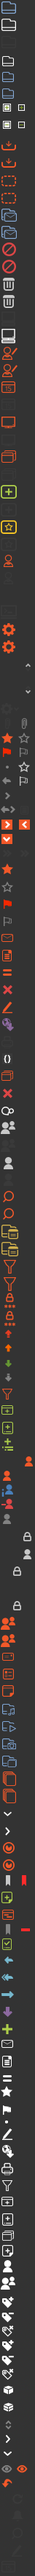
<style>
.page{position:relative;width:35px;height:2576px;background:#333333}
.page>*{position:absolute;margin:0}
.t1{font:7.9px "BrandonGrotesque-Black";color:#ffffff;text-transform:uppercase}
.t2{font:11.5px "BrandonGrotesque-Black";color:#487fba}
</style>
<div class="page">
<p class="t1" style="left:4px;top:1055px;width:3px;height:8px;rotate:180deg">}</p>
<p class="t1" style="left:7px;top:1055px;width:4px;height:8px">}</p>
<p class="t2" style="left:1px;top:1489px;width:3px;height:8px">i</p>
</div>
